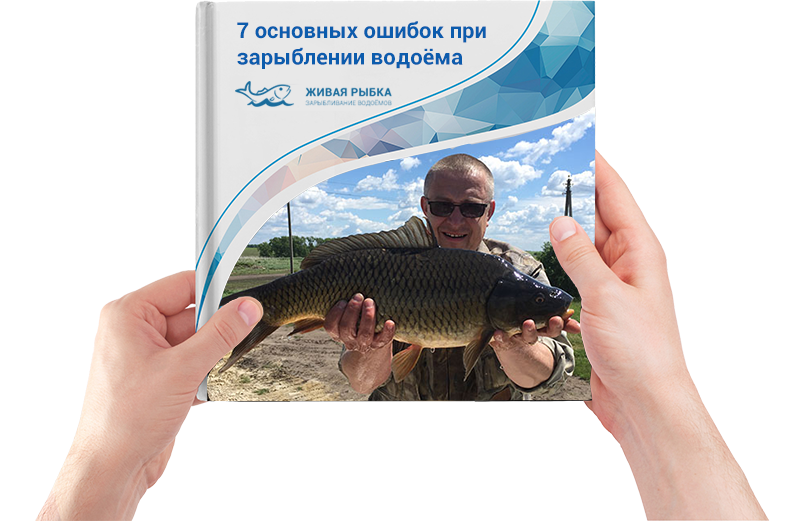
<style>
.page{position:relative;width:800px;height:521px;background:#ffffff}
.page>*{position:absolute;margin:0}
.t1{font:22.1px "Roboto-Bold";color:#0c5cad}
</style>
<div class="page">
<p class="t1" style="left:237px;top:21px;width:249px;height:48px">7 основных ошибок при<br>зарыблении водоёма</p>
</div>
